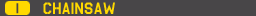
<style>
.page{position:relative;width:256px;height:16px;background:#484648}
.page>*{position:absolute;margin:0}
.t1{font:14px "USAAF_Serial_Stencil";letter-spacing:0.1em;color:#484648}
.t2{font:16px "USAAF_Stencil";letter-spacing:0.04em;color:#ffd900}
</style>
<div class="page">
<p class="t1" style="left:16px;top:3px;width:3px;height:11px">1</p>
<p class="t2" style="left:43px;top:2px;width:72px;height:12px">CHainsaw</p>
</div>
